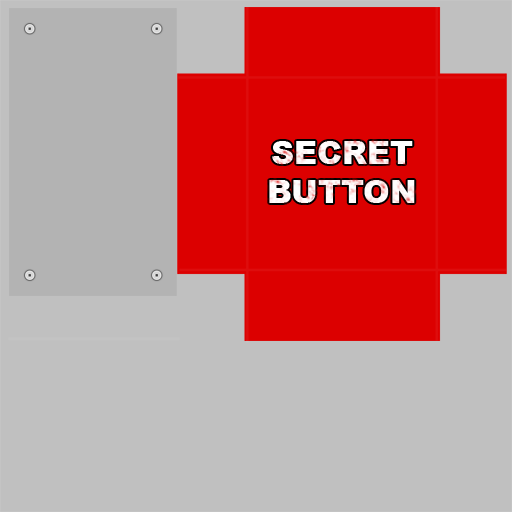
<style>
.page{position:relative;width:512px;height:512px;background:#c0c0c0}
.page>*{position:absolute;margin:0}
.t1{font:32px "Arial-Black";color:#ffffff}
</style>
<div class="page">
<p class="t1" style="left:269px;top:141px;width:146px;height:62px;text-align:center">SECRET<br>BUTTON</p>
</div>
